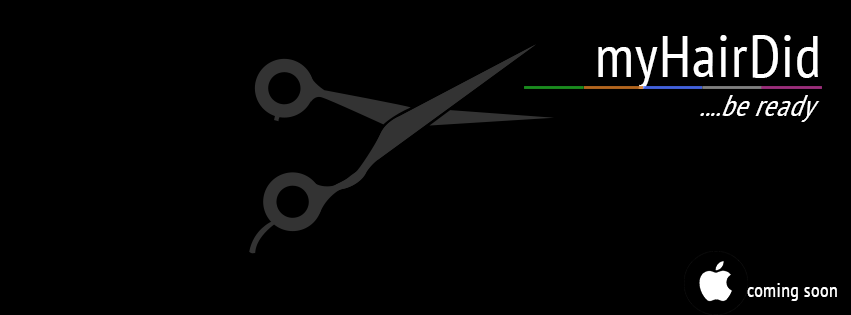
<style>
.page{position:relative;width:851px;height:315px;background:#000000}
.page>*{position:absolute;margin:0}
.t1{font:59.4px "PTSans-Narrow";letter-spacing:0.02em;color:#ffffff}
.t2{font:32.2px "PTSans-Narrow";letter-spacing:0.02em;color:#ffffff;scale:0.93 1}
.t3{font:20.1px "PTSans-Narrow";letter-spacing:0.02em;color:#ffffff}
</style>
<div class="page">
<p class="t1" style="left:598px;top:35px;width:220px;height:54px">myHairDid</p>
<p class="t2" style="left:700px;top:95px;width:120px;height:27px">....be ready</p>
<p class="t3" style="left:747px;top:283px;width:90px;height:18px">coming soon</p>
</div>
